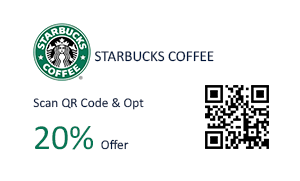
<style>
.page{position:relative;width:300px;height:181px;background:#ffffff}
.page>*{position:absolute;margin:0}
.t1{font:15px "Calibri";color:#00153a}
.t2{font:13.3px "Calibri";color:#00153a}
.t3{font:35.6px "Calibri";color:#067655}
</style>
<div class="page">
<p class="t1" style="left:94px;top:51px;width:120px;height:11px">STARBUCKS COFFEE</p>
<p class="t2" style="left:33px;top:97px;width:111px;height:53px">Scan QR Code &amp; Opt <br><span class="t3">20% </span>Offer</p>
</div>
